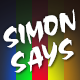
<style>
.page{position:relative;width:80px;height:80px}
.page>*{position:absolute;margin:0}
.t1{font:28px "Cezanne";letter-spacing:-0.02em;color:#ffffff;text-transform:uppercase}
</style>
<div class="page">
<p class="t1" style="left:3px;top:9px;width:73px;height:39px;rotate:-15deg">Simon</p>
<p class="t1" style="left:11px;top:38px;width:63px;height:35px;rotate:-15deg">says</p>
</div>
